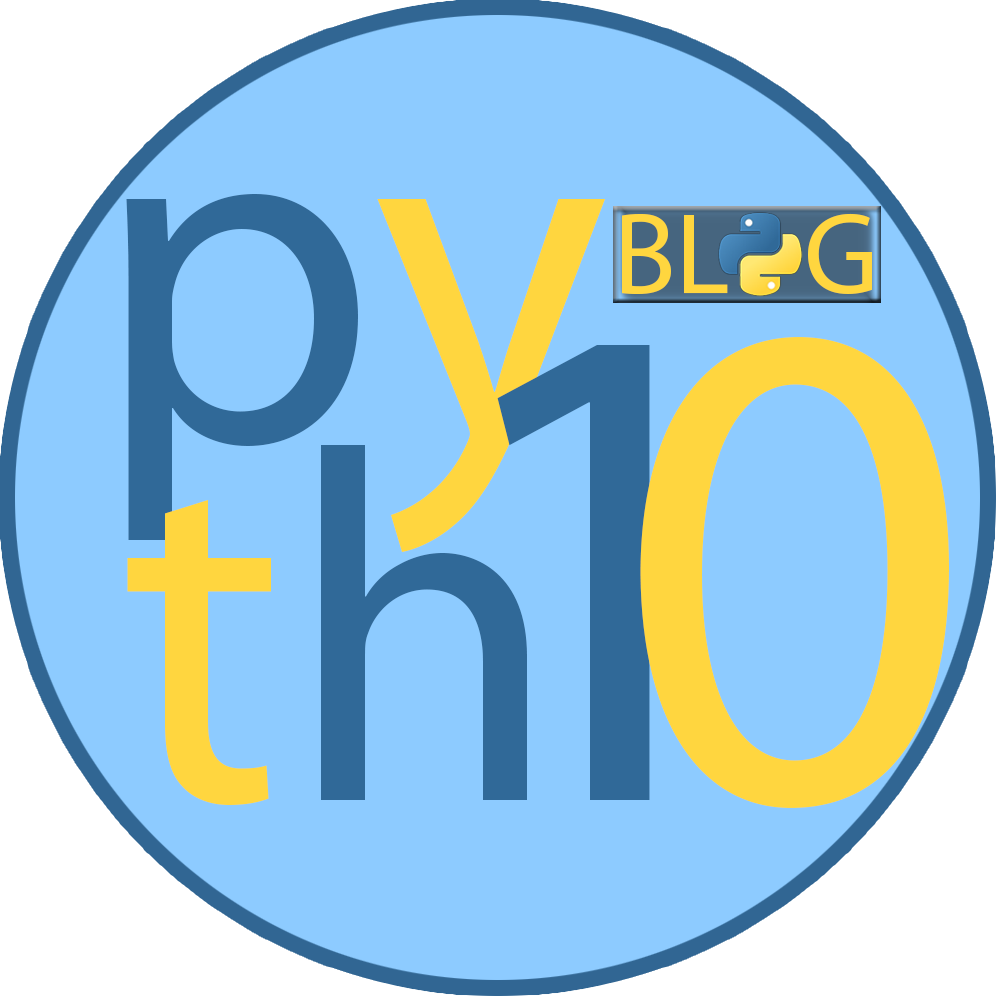
<style>
.page{position:relative;width:1000px;height:1000px;background:#8dcbff}
.page>*{position:absolute;margin:0}
.t1{font:500px "MyriadPro-Regular";color:#306998}
.t2{font:500px "MyriadPro-Regular";color:#ffd63f}
.t3{font:115.1px "MyriadPro-Regular";color:#ffd63f}
.t4{font:700px "MyriadPro-Regular";color:#ffd63f}
.t5{font:700px "MyriadPro-Regular";color:#306998}
</style>
<div class="page">
<p class="t1" style="left:126px;top:194px;width:479px;height:358px">p<span class="t2">y</span></p>
<p class="t3" style="left:622px;top:213px;width:250px;height:81px">BL   G</p>
<p class="t4" style="left:640px;top:337px;width:309px;height:471px">0</p>
<p class="t5" style="left:497px;top:345px;width:153px;height:455px">1</p>
<p class="t2" style="left:127px;top:445px;width:400px;height:360px">t<span class="t1">h</span></p>
</div>
